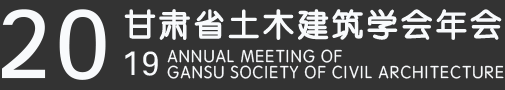
<style>
.page{position:relative;width:505px;height:90px;background:#333333}
.page>*{position:absolute;margin:0}
.t1{font:101.7px "SIL-Hei-Med-Jian";letter-spacing:0.04em;color:#f8fafc}
.t2{font:30.7px "STYuanti-SC-Regular";letter-spacing:0.1em;color:#f8fafc;font-weight:bold}
.t3{font:35.1px "SIL-Hei-Med-Jian";letter-spacing:0.04em;color:#f8fafc}
.t4{font:17.5px/15.7px "STYuanti-SC-Regular";letter-spacing:0.04em;color:#f8fafc}
</style>
<div class="page">
<p class="t1" style="left:2px;top:9px;width:104px;height:71px">20</p>
<p class="t2" style="left:124px;top:9px;width:378px;height:31px">甘肃省土木建筑学会年会</p>
<p class="t3" style="left:125px;top:51px;width:33px;height:25px">19</p>
<p class="t4" style="left:167px;top:49px;width:337px;height:30px">ANNUAL MEETING OF<br>GANSU SOCIETY OF CIVIL ARCHITECTURE</p>
</div>
